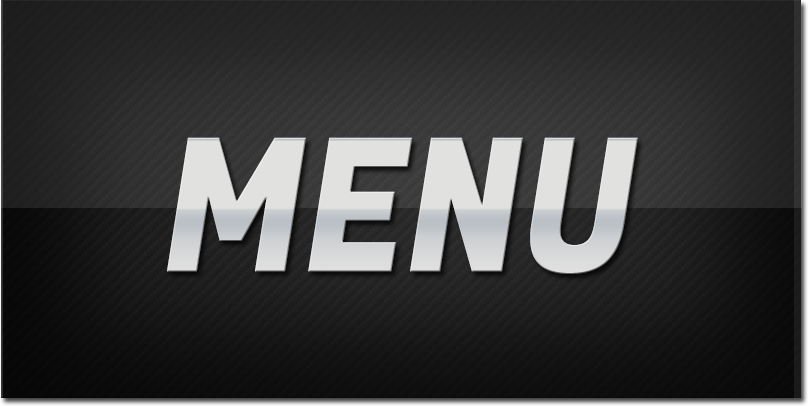
<style>
.page{position:relative;width:808px;height:406px}
.page>*{position:absolute;margin:0}
.t1{font:185.2px "FugazOne-Regular";color:#dfdfdf;scale:0.89 1}
</style>
<div class="page">
<p class="t1" style="left:167px;top:137px;width:471px;height:137px">MENU</p>
</div>
